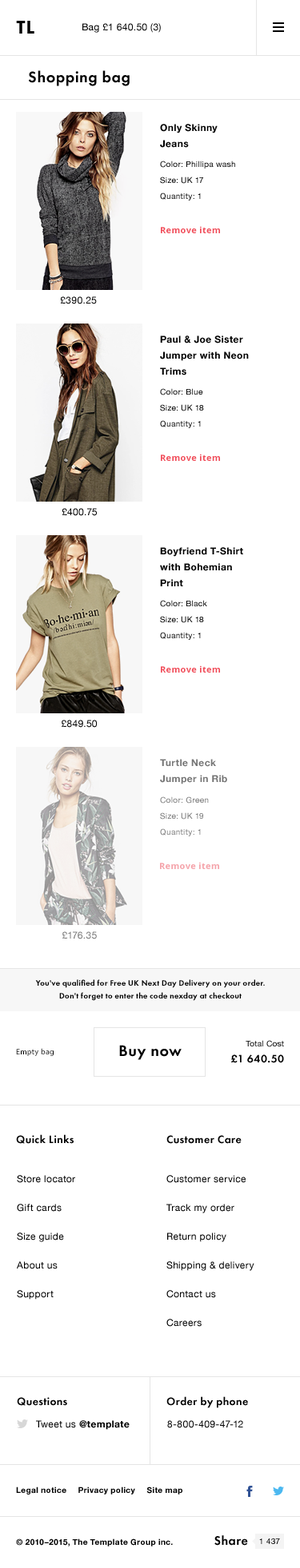
<style>
.page{position:relative;width:300px;height:1568px;background:#ffffff}
.page>*{position:absolute;margin:0}
.t1{font:19.2px "FuturaPT-Heavy";letter-spacing:0.03em;color:#000000;text-transform:uppercase}
.t2{font:9.6px "HelveticaNeue";letter-spacing:0.03em;color:#000000}
.t3{font:16px "FuturaPT-Demi";letter-spacing:0.03em;color:#000000}
.t4{font:9.6px/16px "HelveticaNeue-Bold";letter-spacing:0.03em;color:#000000}
.t5{font:8px/16px "HelveticaNeue";letter-spacing:0.03em;color:#000000}
.t6{font:8.8px "OpenSans-Bold";letter-spacing:0.03em;color:#f14a58}
.t7{font:9.6px/16px "HelveticaNeue-Bold";letter-spacing:0.03em;color:#757575}
.t8{font:8px/16px "HelveticaNeue";letter-spacing:0.03em;color:#757575}
.t9{font:8.8px "OpenSans-Bold";letter-spacing:0.03em;color:#f5a3aa}
.t10{font:9.6px "HelveticaNeue";letter-spacing:0.03em;color:#757575}
.t11{font:8px/12.8px "FuturaPT-Demi";letter-spacing:0.03em;color:#000000}
.t12{font:8px "MyriadPro-Regular";letter-spacing:0.03em;color:#000000}
.t13{font:8px "HelveticaNeue";letter-spacing:0.03em;color:#000000}
.t14{font:11.2px "FuturaPT-Demi";letter-spacing:0.03em;color:#000000}
.t15{font:9.6px/28.8px "HelveticaNeue";letter-spacing:0.03em;color:#000000}
.t16{font:9.6px "HelveticaNeue-Bold";letter-spacing:0.03em;color:#000000}
.t17{font:8px "HelveticaNeue-Bold";letter-spacing:0.03em;color:#000000}
.t18{font:12.8px "FuturaPT-Demi";letter-spacing:0.03em;color:#000000}
</style>
<div class="page">
<p class="t1" style="left:16px;top:21px;width:18px;height:13px">tl</p>
<p class="t2" style="left:82px;top:23px;width:79px;height:10px">Bag £1 640.50 (3)</p>
<p class="t3" style="left:28px;top:70px;width:101px;height:16px">Shopping bag</p>
<p class="t4" style="left:160px;top:124px;width:57px;height:24px">Only Skinny <br>Jeans</p>
<p class="t5" style="left:160px;top:161px;width:75px;height:39px">Color: Phillipa wash<br>Size: UK 17<br>Quantity: 1</p>
<p class="t6" style="left:161px;top:226px;width:59px;height:7px">Remove item</p>
<p class="t2" style="left:60px;top:296px;width:37px;height:8px">£390.25</p>
<p class="t4" style="left:160px;top:335px;width:88px;height:40px">Paul &amp; Joe Sister <br>Jumper with Neon <br>Trims</p>
<p class="t5" style="left:160px;top:388px;width:44px;height:40px">Color: Blue<br>Size: UK 18<br>Quantity: 1</p>
<p class="t6" style="left:161px;top:454px;width:59px;height:7px">Remove item</p>
<p class="t2" style="left:62px;top:508px;width:35px;height:8px">£400.75</p>
<p class="t4" style="left:160px;top:547px;width:83px;height:39px">Boyfriend T-Shirt <br>with Bohemian <br>Print</p>
<p class="t5" style="left:160px;top:600px;width:47px;height:40px">Color: Black<br>Size: UK 18<br>Quantity: 1</p>
<p class="t6" style="left:161px;top:665px;width:59px;height:8px">Remove item</p>
<p class="t2" style="left:62px;top:720px;width:35px;height:8px">£849.50</p>
<p class="t7" style="left:160px;top:759px;width:67px;height:25px">Turtle Neck <br>Jumper in Rib</p>
<p class="t8" style="left:160px;top:796px;width:48px;height:40px">Color: Green<br>Size: UK 19<br>Quantity: 1</p>
<p class="t9" style="left:160px;top:862px;width:59px;height:7px">Remove item</p>
<p class="t10" style="left:62px;top:931px;width:35px;height:8px">£176.35</p>
<p class="t11" style="left:35px;top:979px;width:229px;height:22px;text-align:center">You've qualified for Free UK Next Day Delivery on your order.<br>Don't forget to enter the code nexday at checkout</p>
<p class="t12" style="left:16px;top:1048px;width:38px;height:8px">Empty bag</p>
<p class="t3" style="left:119px;top:1045px;width:62px;height:15px">Buy now</p>
<p class="t13" style="left:245px;top:1040px;width:39px;height:7px">Total Cost</p>
<p class="t14" style="left:231px;top:1054px;width:53px;height:9px">£1 640.50</p>
<p class="t14" style="left:16px;top:1134px;width:57px;height:10px">Quick Links</p>
<p class="t14" style="left:166px;top:1135px;width:75px;height:9px">Customer Care</p>
<p class="t15" style="left:17px;top:1175px;width:58px;height:125px">Store locator<br>Gift cards<br>Size guide<br>About us<br>Support</p>
<p class="t15" style="left:166px;top:1175px;width:88px;height:152px">Customer service<br>Track my order<br>Return policy<br>Shipping &amp; delivery<br>Contact us<br>Careers</p>
<p class="t14" style="left:17px;top:1397px;width:50px;height:9px">Questions</p>
<p class="t14" style="left:166px;top:1396px;width:82px;height:12px">Order by phone</p>
<p class="t16" style="left:36px;top:1420px;width:93px;height:10px"><span class="t2">Tweet us </span>@template</p>
<p class="t2" style="left:167px;top:1420px;width:76px;height:8px">8-800-409-47-12</p>
<p class="t17" style="left:16px;top:1487px;width:166px;height:8px">Legal notice     Privacy policy     Site map</p>
<p class="t17" style="left:16px;top:1538px;width:157px;height:8px">© 2010–2015, The Template Group inc.</p>
<p class="t18" style="left:214px;top:1535px;width:34px;height:11px">Share</p>
<p class="t13" style="left:259px;top:1538px;width:21px;height:6px">1 437</p>
</div>
